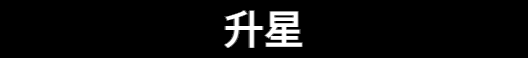
<style>
.page{position:relative;width:528px;height:58px;background:#000000}
.page>*{position:absolute;margin:0}
.t1{font:40px "WebPSD-18463539-0-Regular";color:#ffffff;font-weight:bold}
</style>
<div class="page">
<p class="t1" style="left:0px;top:0px;width:528px;height:58px">升星</p>
</div>
